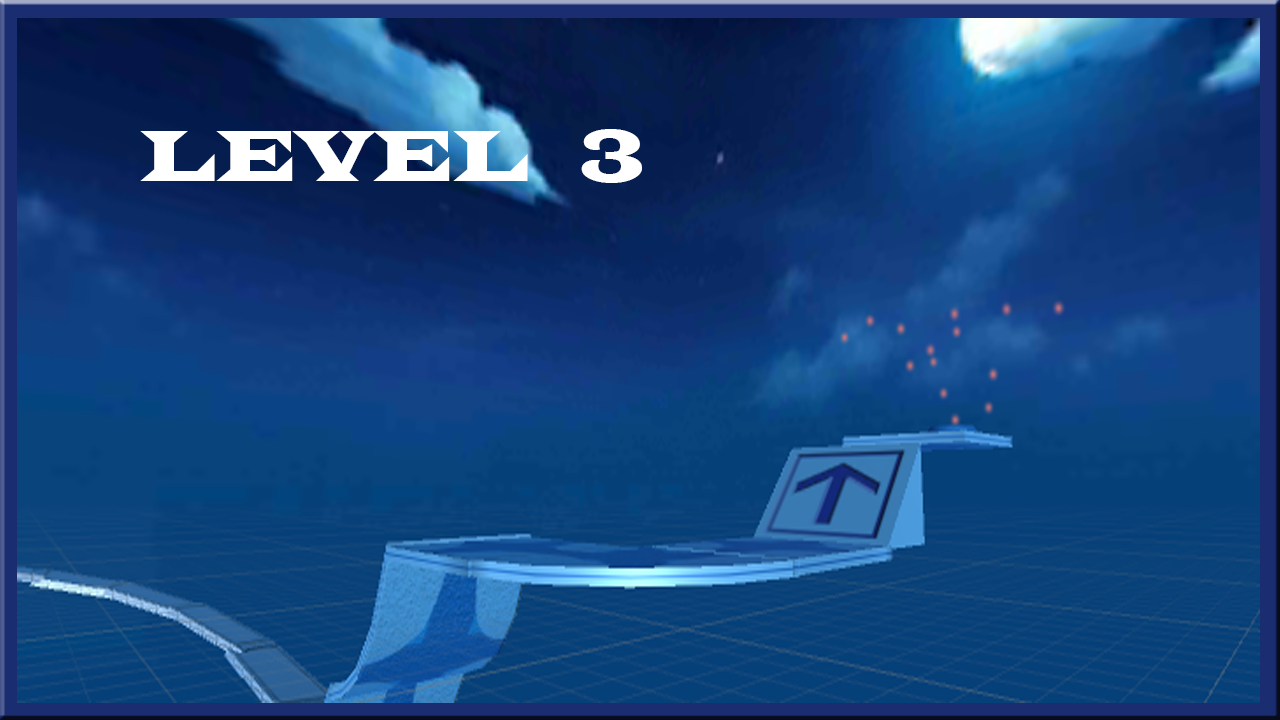
<style>
.page{position:relative;width:1280px;height:720px}
.page>*{position:absolute;margin:0}
.t1{font:75.4px "LatinWide";color:#ffffff;scale:0.76 1}
</style>
<div class="page">
<p class="t1" style="left:140px;top:129px;width:502px;height:54px">LEVEL   3</p>
</div>
